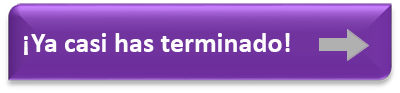
<style>
.page{position:relative;width:400px;height:93px}
.page>*{position:absolute;margin:0}
.t1{font:27.7px "Calibri-Bold";letter-spacing:0.005em;color:#fdfbfe}
</style>
<div class="page">
<p class="t1" style="left:24px;top:33px;width:266px;height:22px">¡Ya casi has terminado!</p>
</div>
